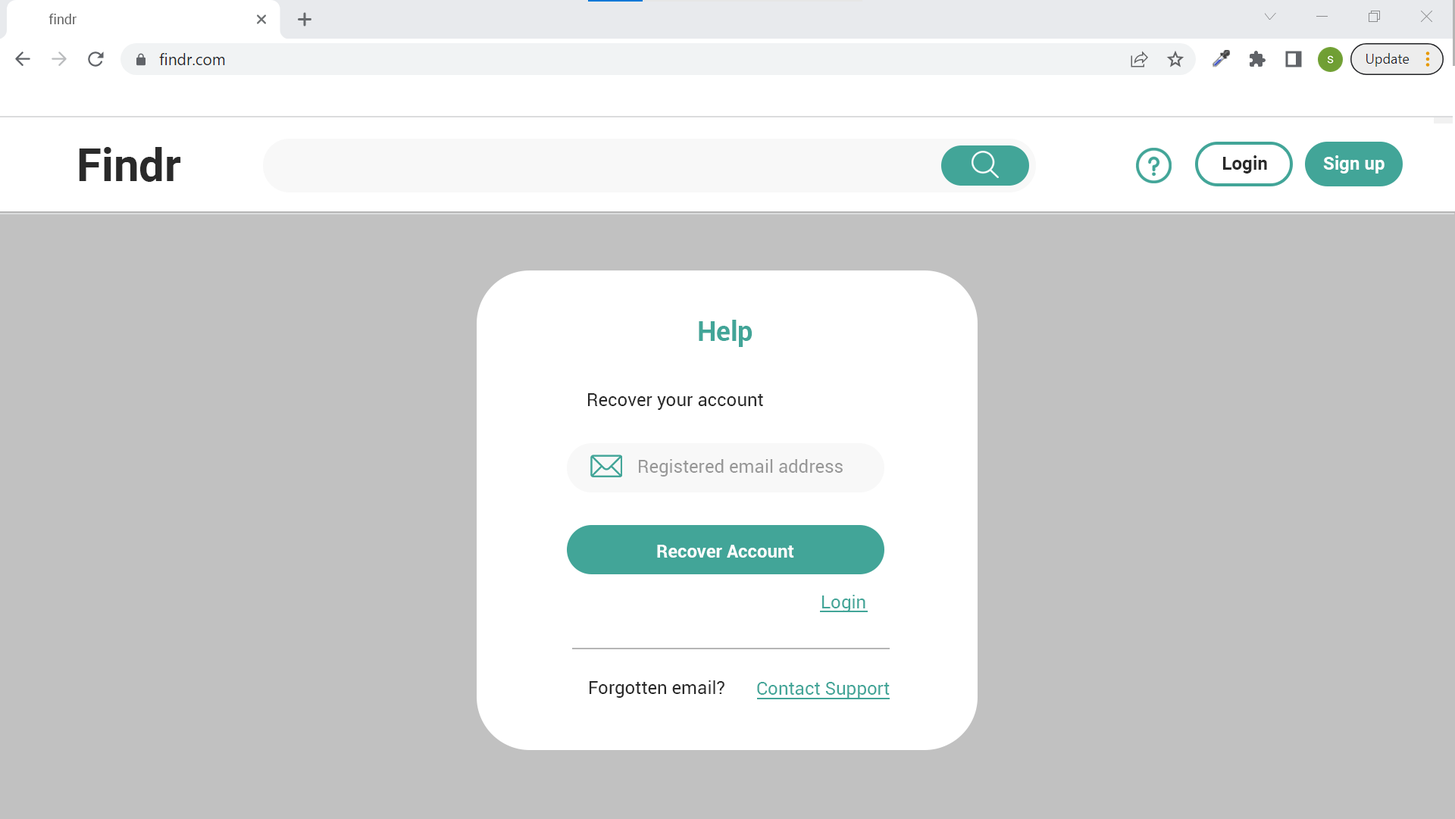
<style>
.page{position:relative;width:1455px;height:819px;background:#c1c1c1}
.page>*{position:absolute;margin:0}
.t1{font:13.6px "Roboto-Regular";color:#5f5f5f}
.t2{font:45.5px "Roboto-Bold";color:#2a2a2a}
.t3{font:18.2px "Roboto-Bold";color:#2a2a2a}
.t4{font:18.2px "Roboto-Bold";color:#ffffff}
.t5{font:27.3px "Roboto-Bold";color:#42a598}
.t6{font:18.2px "Roboto-Regular";color:#2a2a2a}
.t7{font:18.2px "Roboto-Regular";color:#989898}
.t8{font:18.2px "Roboto-Regular";color:#42a598}
</style>
<div class="page">
<p class="t1" style="left:49px;top:14px;width:28px;height:10px">findr</p>
<p class="t2" style="left:79px;top:147px;width:102px;height:35px">Findr</p>
<p class="t3" style="left:1223px;top:155px;width:44px;height:19px">Login</p>
<p class="t4" style="left:1323px;top:155px;width:62px;height:19px">Sign up</p>
<p class="t5" style="left:699px;top:320px;width:54px;height:27px">Help</p>
<p class="t6" style="left:588px;top:393px;width:175px;height:17px">Recover your account</p>
<p class="t7" style="left:639px;top:459px;width:204px;height:18px">Registered email address</p>
<p class="t4" style="left:657px;top:545px;width:137px;height:13px">Recover Account</p>
<p class="t8" style="left:822px;top:595px;width:44px;height:17px">Login</p>
<p class="t6" style="left:590px;top:681px;width:135px;height:17px">Forgotten email?</p>
<p class="t8" style="left:757px;top:682px;width:133px;height:17px">Contact Support</p>
</div>
